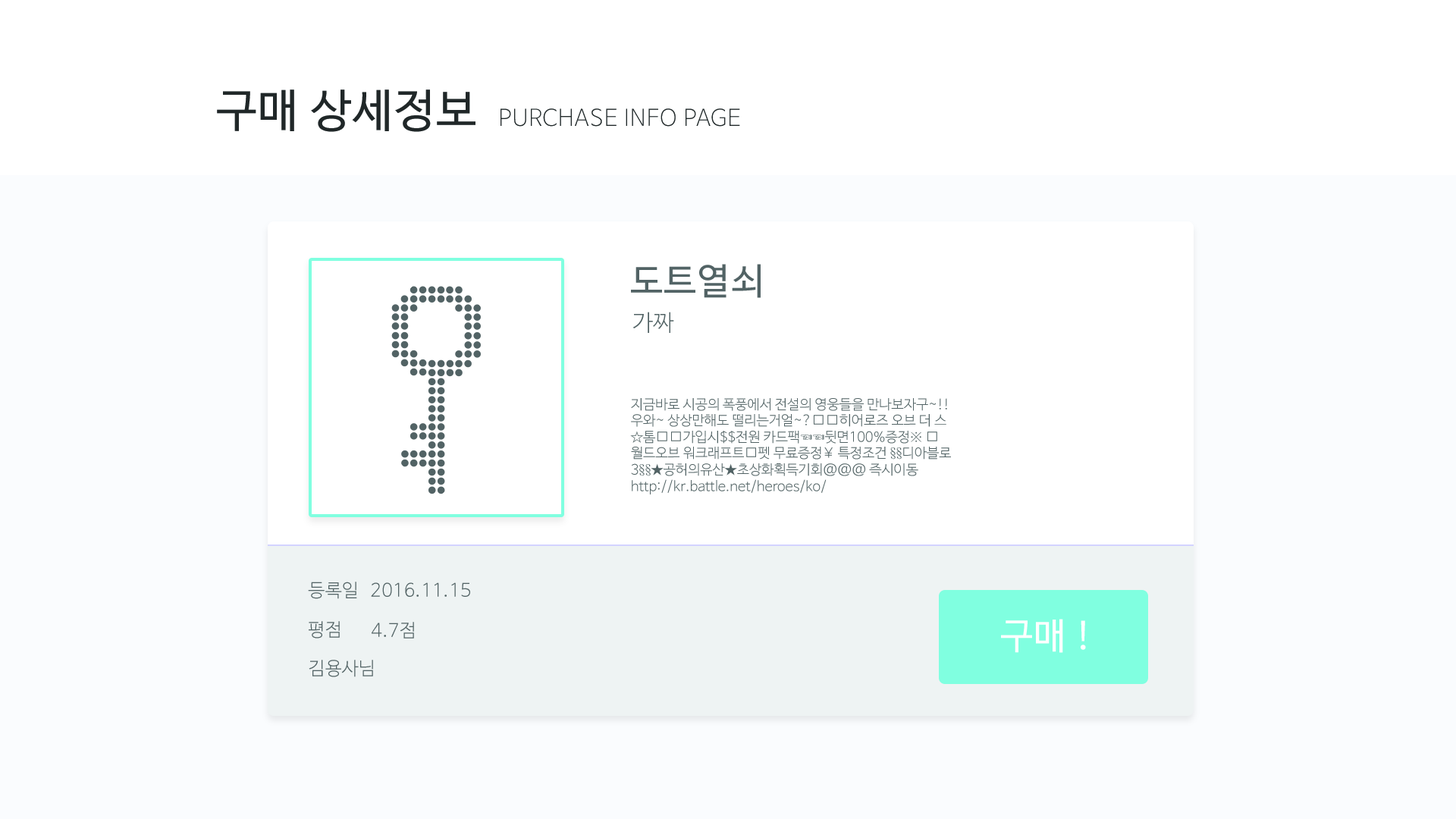
<style>
.page{position:relative;width:1456px;height:819px;background:#ffffff}
.page>*{position:absolute;margin:0}
.t1{font:45.5px "NanumBarunGothic";letter-spacing:0.025em;color:#202728}
.t2{font:22.7px "NanumBarunGothicUltraLight";letter-spacing:0.025em;color:#202728}
.t3{font:36.4px "NanumBarunGothic";letter-spacing:0.025em;color:#526364}
.t4{font:22.7px "NanumBarunGothicLight";letter-spacing:0.025em;color:#526364}
.t5{font:13.6px "NanumBarunGothicLight";color:#526364}
.t6{font:13.6px "Gulim";color:#526364}
.t7{font:18.2px "NanumBarunGothicLight";letter-spacing:0.025em;color:#526364}
.t8{font:36.4px "NanumBarunGothic";letter-spacing:0.025em;color:#ffffff}
</style>
<div class="page">
<p class="t1" style="left:217px;top:89px;width:258px;height:43px">구매 상세정보</p>
<p class="t2" style="left:500px;top:108px;width:240px;height:19px">PURCHASE INFO PAGE</p>
<p class="t3" style="left:631px;top:264px;width:130px;height:34px">도트열쇠</p>
<p class="t4" style="left:632px;top:312px;width:42px;height:21px">가짜</p>
<p class="t5" style="left:630px;top:398px;width:321px;height:96px">지금바로 시공의 폭풍에서 전설의 영웅들을 만나보자구~!! <br>우와~ 상상만해도 떨리는거얼~?<span class="t6">♚♚</span>히어로즈 오브 더 스<br>☆톰<span class="t6">♚♚</span>가입시$$전원 카드팩☜☜뒷면100%증정※ <span class="t6">♜<br></span>월드오브 워크래프트<span class="t6">♜</span>펫 무료증정￥ 특정조건 §§디아블로<br>3§§★공허의유산★초상화획득기회@@@ 즉시이동<br>http://kr.battle.net/heroes/ko/</p>
<p class="t7" style="left:308px;top:582px;width:49px;height:17px">등록일</p>
<p class="t7" style="left:371px;top:582px;width:99px;height:15px">2016.11.15</p>
<p class="t7" style="left:309px;top:621px;width:31px;height:18px">평점</p>
<p class="t7" style="left:372px;top:622px;width:42px;height:17px">4.7점</p>
<p class="t8" style="left:1001px;top:619px;width:85px;height:34px">구매 !</p>
<p class="t7" style="left:309px;top:660px;width:64px;height:17px">김용사님</p>
</div>
